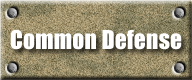
<style>
.page{position:relative;width:192px;height:80px}
.page>*{position:absolute;margin:0}
.t1{font:24px "Impact";color:#ffffff}
</style>
<div class="page">
<p class="t1" style="left:10px;top:29px;width:172px;height:21px">Common Defense</p>
</div>
